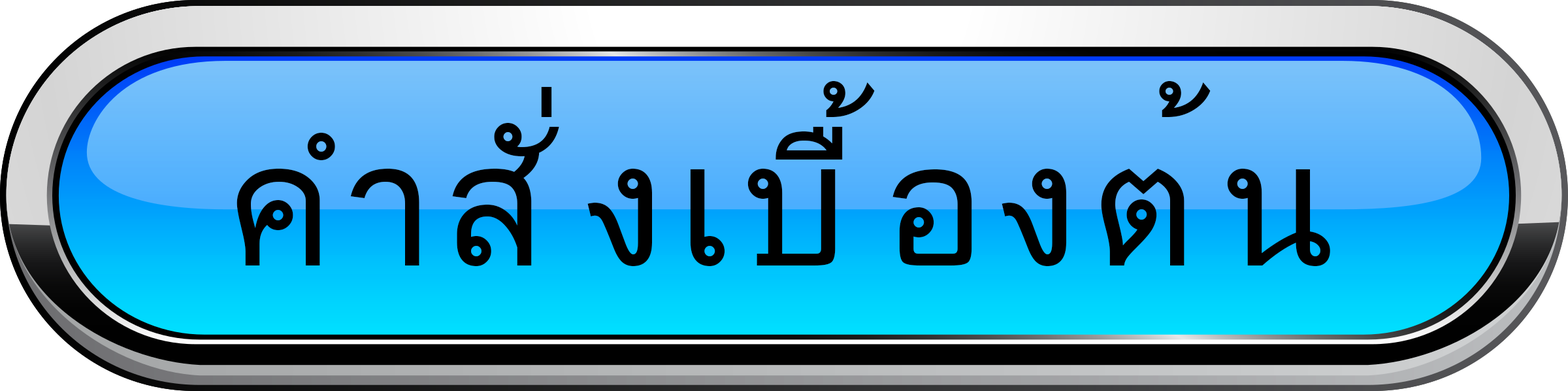
<style>
.page{position:relative;width:1568px;height:391px}
.page>*{position:absolute;margin:0}
.t1{font:172.9px "DokChampa";letter-spacing:0.075em;color:#000000}
</style>
<div class="page">
<p class="t1" style="left:237px;top:80px;width:1093px;height:186px">คำสั่งเบื้องต้น</p>
</div>
